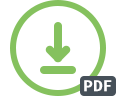
<style>
.page{position:relative;width:116px;height:96px;background:#ffffff}
.page>*{position:absolute;margin:0}
.t1{font:16px "FiraMono-Bold";color:#ffffff}
</style>
<div class="page">
<p class="t1" style="left:84px;top:80px;width:28px;height:12px">PDF</p>
</div>
